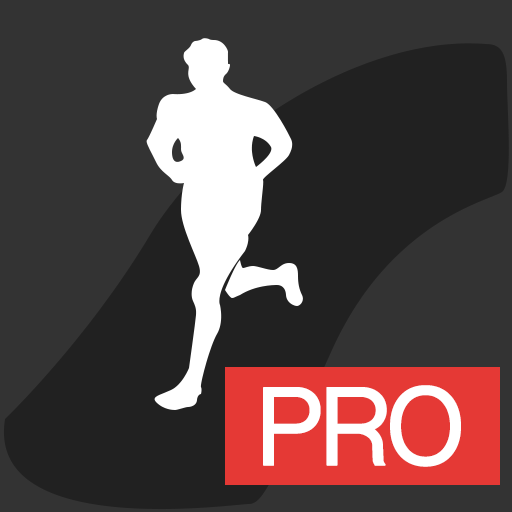
<style>
.page{position:relative;width:512px;height:512px;background:#333333}
.page>*{position:absolute;margin:0}
.t1{font:102.7px "ShreeDev0714-Bold";letter-spacing:-0.04em;color:#ffffff;font-weight:bold}
</style>
<div class="page">
<p class="t1" style="left:263px;top:385px;width:198px;height:82px">PRO</p>
</div>
